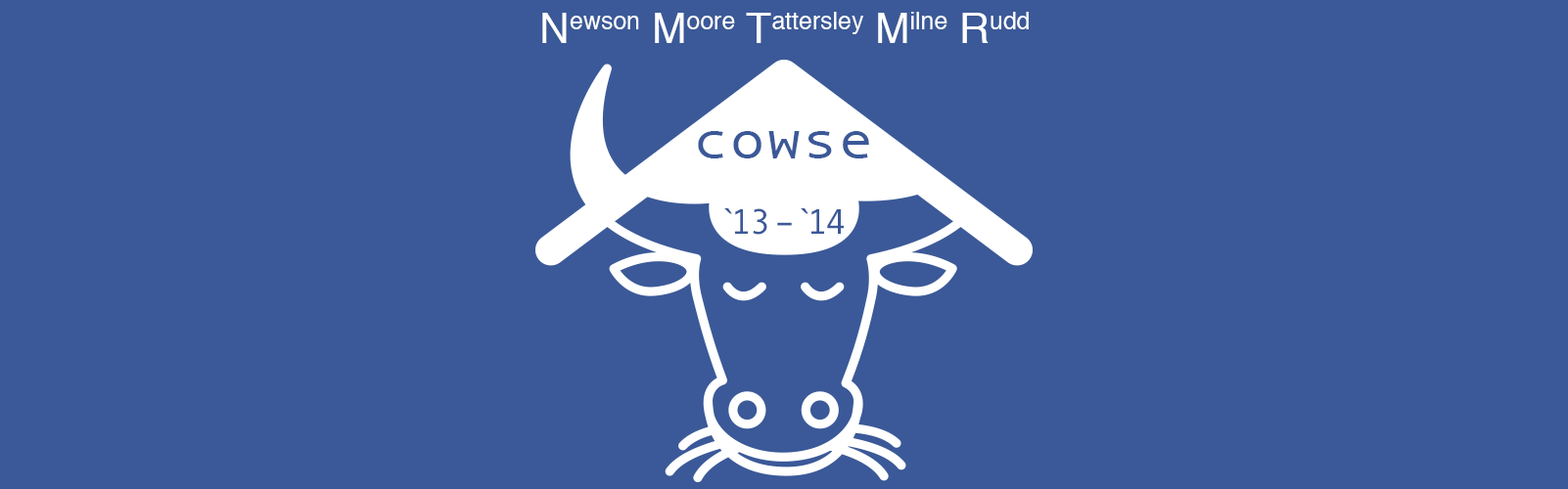
<style>
.page{position:relative;width:1568px;height:489px;background:#3b5998}
.page>*{position:absolute;margin:0}
.t1{font:41.7px "Helvetica";color:#ffffff}
.t2{font:52.8px "AndaleMono";color:#3b5998;scale:1.15 1}
.t3{font:35.6px "AndaleMono";color:#3b5998}
</style>
<div class="page">
<p class="t1" style="left:542px;top:12px;width:487px;height:31px">Newson Moore Tattersley Milne Rudd</p>
<p class="t2" style="left:698px;top:131px;width:171px;height:28px">cowse</p>
<p class="t3" style="left:724px;top:208px;width:120px;height:27px">`13–`14</p>
</div>
